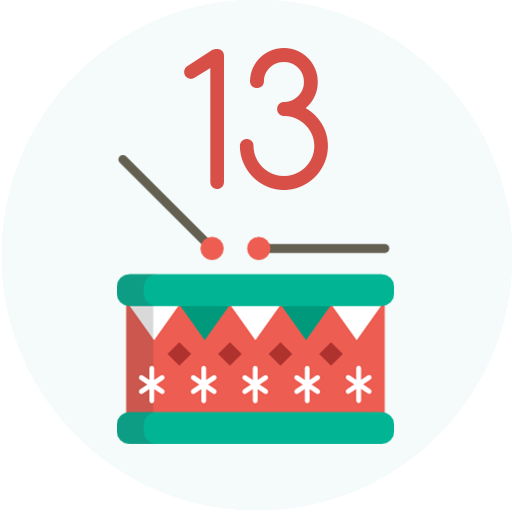
<style>
.page{position:relative;width:512px;height:512px;background:#f4fbfa}
.page>*{position:absolute;margin:0}
.t1{font:220.4px "Antipasto";color:#d84f48}
</style>
<div class="page">
<p class="t1" style="left:184px;top:48px;width:144px;height:142px">13</p>
</div>
